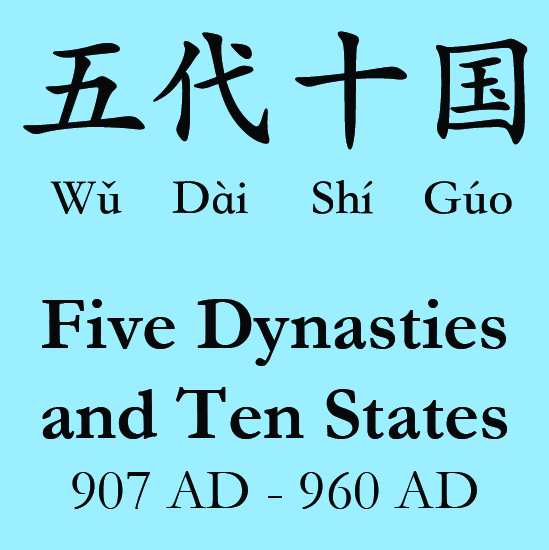
<style>
.page{position:relative;width:549px;height:550px;background:#9befff}
.page>*{position:absolute;margin:0}
.t1{font:133.3px "STKaiti-SC-Bold";color:#070809}
.t2{font:50px "STKaiti-SC-Bold";color:#070809}
.t3{font:75px "Garamond-Bold";color:#070809}
.t4{font:58.3px "Garamond";color:#070809}
</style>
<div class="page">
<p class="t1" style="left:23px;top:31px;width:505px;height:119px">五代十国</p>
<p class="t2" style="left:50px;top:180px;width:462px;height:34px">Wǔ    Dài     Shí    Gúo</p>
<p class="t3" style="left:42px;top:299px;width:465px;height:210px;text-align:center">Five Dynasties<br>and Ten States<br><span class="t4">907 AD - 960 AD</span></p>
</div>
